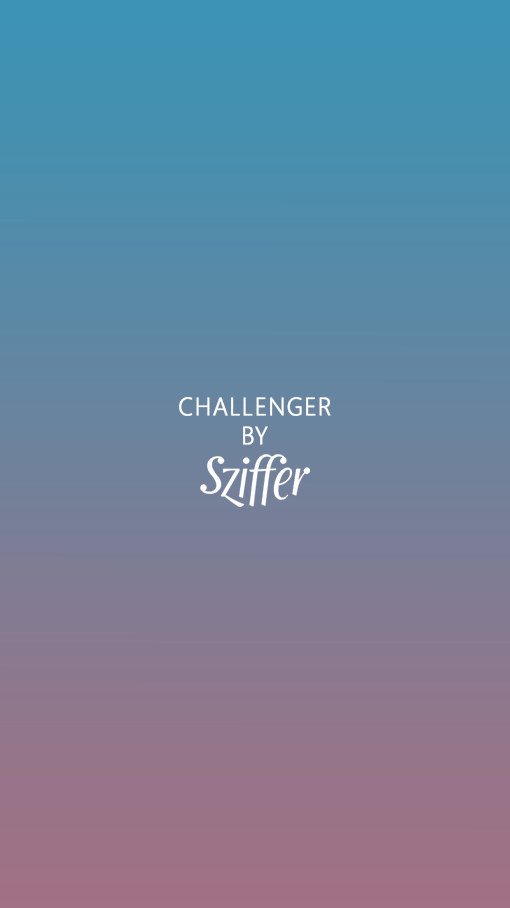
<style>
.page{position:relative;width:510px;height:908px}
.page>*{position:absolute;margin:0}
.t1{font:25px "SegoeUI-Light";letter-spacing:0.04em;color:#ffffff;text-transform:uppercase;font-weight:bold;scale:0.96 1}
</style>
<div class="page">
<p class="t1" style="left:179px;top:397px;width:152px;height:19px">challenger</p>
<p class="t1" style="left:243px;top:426px;width:25px;height:19px">by</p>
</div>
